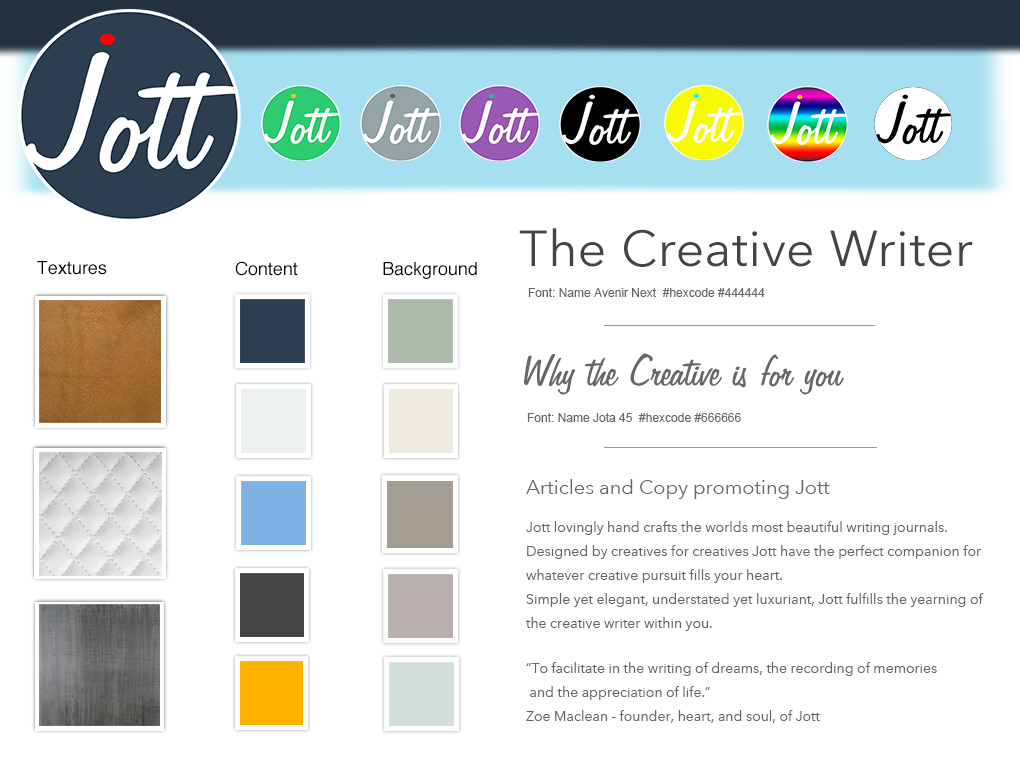
<style>
.page{position:relative;width:1020px;height:760px;background:#ffffff}
.page>*{position:absolute;margin:0}
.t1{font:50px "AvenirNextLTW01-Regular";letter-spacing:0.025em;color:#444444}
.t2{font:18px "Helvetica";color:#000000}
.t3{font:12px "ArialMT";color:#666666}
.t4{font:50px "Jott45Normal";color:#666666}
.t5{font:20px "AvenirNextLTW01-Regular";color:#666666}
.t6{font:14px/24px "AvenirNextLTW01-Regular";color:#666666}
</style>
<div class="page">
<p class="t1" style="left:519px;top:228px;width:454px;height:39px">The Creative Writer</p>
<p class="t2" style="left:37px;top:261px;width:70px;height:14px">Textures</p>
<p class="t2" style="left:235px;top:261px;width:63px;height:15px">Content</p>
<p class="t2" style="left:383px;top:262px;width:94px;height:17px">Background</p>
<p class="t3" style="left:528px;top:288px;width:237px;height:9px">Font: Name Avenir Next  #hexcode #444444</p>
<p class="t4" style="left:524px;top:353px;width:320px;height:42px">Why the Creative is for you</p>
<p class="t3" style="left:527px;top:413px;width:214px;height:9px">Font: Name Jota 45  #hexcode #666666</p>
<p class="t5" style="left:526px;top:479px;width:304px;height:20px">Articles and Copy promoting Jott</p>
<p class="t6" style="left:525px;top:521px;width:459px;height:110px">Jott lovingly hand crafts the worlds most beautiful writing journals.<br>Designed by creatives for creatives Jott have the perfect companion for whatever creative pursuit fills your heart.<br>Simple yet elegant, understated yet luxuriant, Jott fulfills the yearning of the creative writer within you.</p>
<p class="t6" style="left:526px;top:662px;width:411px;height:61px">“To facilitate in the writing of dreams, the recording of memories<br> and the appreciation of life.”<br>Zoe Maclean - founder, heart, and soul, of Jott</p>
</div>
